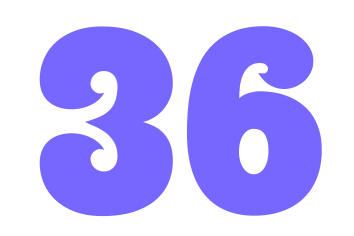
<style>
.page{position:relative;width:354px;height:236px;background:#ffffff}
.page>*{position:absolute;margin:0}
.t1{font:250px "SpicyRice-Regular";color:#7668ff}
</style>
<div class="page">
<p class="t1" style="left:39px;top:26px;width:283px;height:191px">36</p>
</div>
